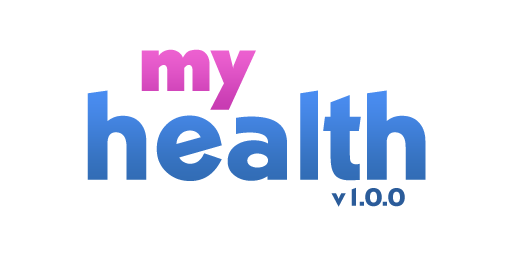
<style>
.page{position:relative;width:512px;height:256px;background:#ffffff}
.page>*{position:absolute;margin:0}
.t1{font:72px "ChansonHeavySFBold";color:#e155c7}
.t2{font:120px "NapaHeavySFBold";color:#3b79cd}
.t3{font:24px "NapaHeavySFBold";color:#2b5c9a}
</style>
<div class="page">
<p class="t1" style="left:141px;top:49px;width:115px;height:61px">my</p>
<p class="t2" style="left:87px;top:90px;width:339px;height:91px">health</p>
<p class="t3" style="left:331px;top:187px;width:74px;height:20px">v1.0.0</p>
</div>
